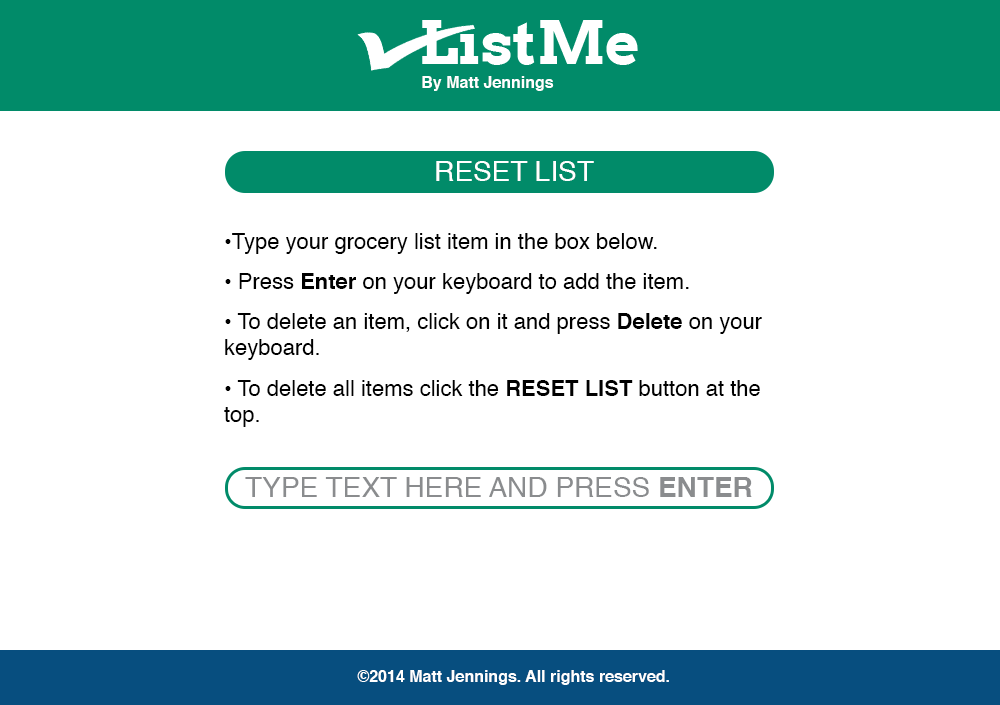
<style>
.page{position:relative;width:1000px;height:705px;background:#ffffff}
.page>*{position:absolute;margin:0}
.t1{font:16px "Helvetica-Bold";color:#ffffff}
.t2{font:28px "Helvetica";color:#ffffff}
.t3{font:22px "Helvetica";color:#000000}
.t4{font:22px "Helvetica-Bold";color:#000000}
.t5{font:28px "Helvetica";color:#8a8c8e}
.t6{font:28px "Helvetica-Bold";color:#8a8c8e}
</style>
<div class="page">
<p class="t1" style="left:422px;top:76px;width:132px;height:15px">By Matt Jennings</p>
<p class="t2" style="left:436px;top:161px;width:158px;height:20px">RESET LIST</p>
<p class="t3" style="left:225px;top:233px;width:432px;height:21px">•Type your grocery list item in the box below.</p>
<p class="t3" style="left:225px;top:273px;width:464px;height:21px">• Press <span class="t4">Enter</span> on your keyboard to add the item.</p>
<p class="t3" style="left:225px;top:313px;width:537px;height:47px">• To delete an item, click on it and press <span class="t4">Delete</span> on your keyboard.</p>
<p class="t3" style="left:224px;top:380px;width:536px;height:47px">• To delete all items click the <span class="t4">RESET LIST</span> button at the top.</p>
<p class="t5" style="left:245px;top:477px;width:507px;height:20px">TYPE TEXT HERE AND PRESS <span class="t6">ENTER</span></p>
<p class="t1" style="left:357px;top:670px;width:312px;height:15px">©2014 Matt Jennings. All rights reserved.</p>
</div>
